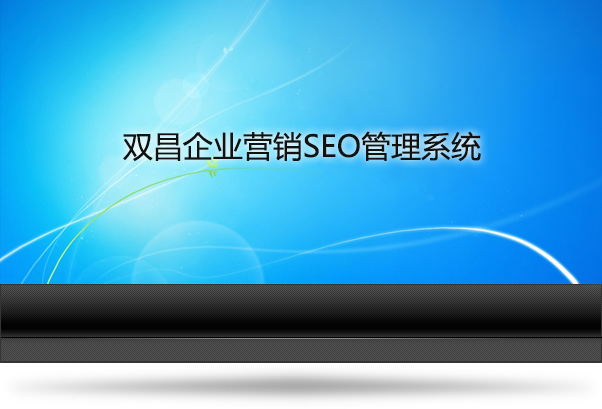
<style>
.page{position:relative;width:602px;height:409px}
.page>*{position:absolute;margin:0}
.t1{font:30px "MicrosoftYaHei";color:#121211}
</style>
<div class="page">
<p class="t1" style="left:123px;top:131px;width:358px;height:31px">双昌企业营销SEO管理系统</p>
</div>
